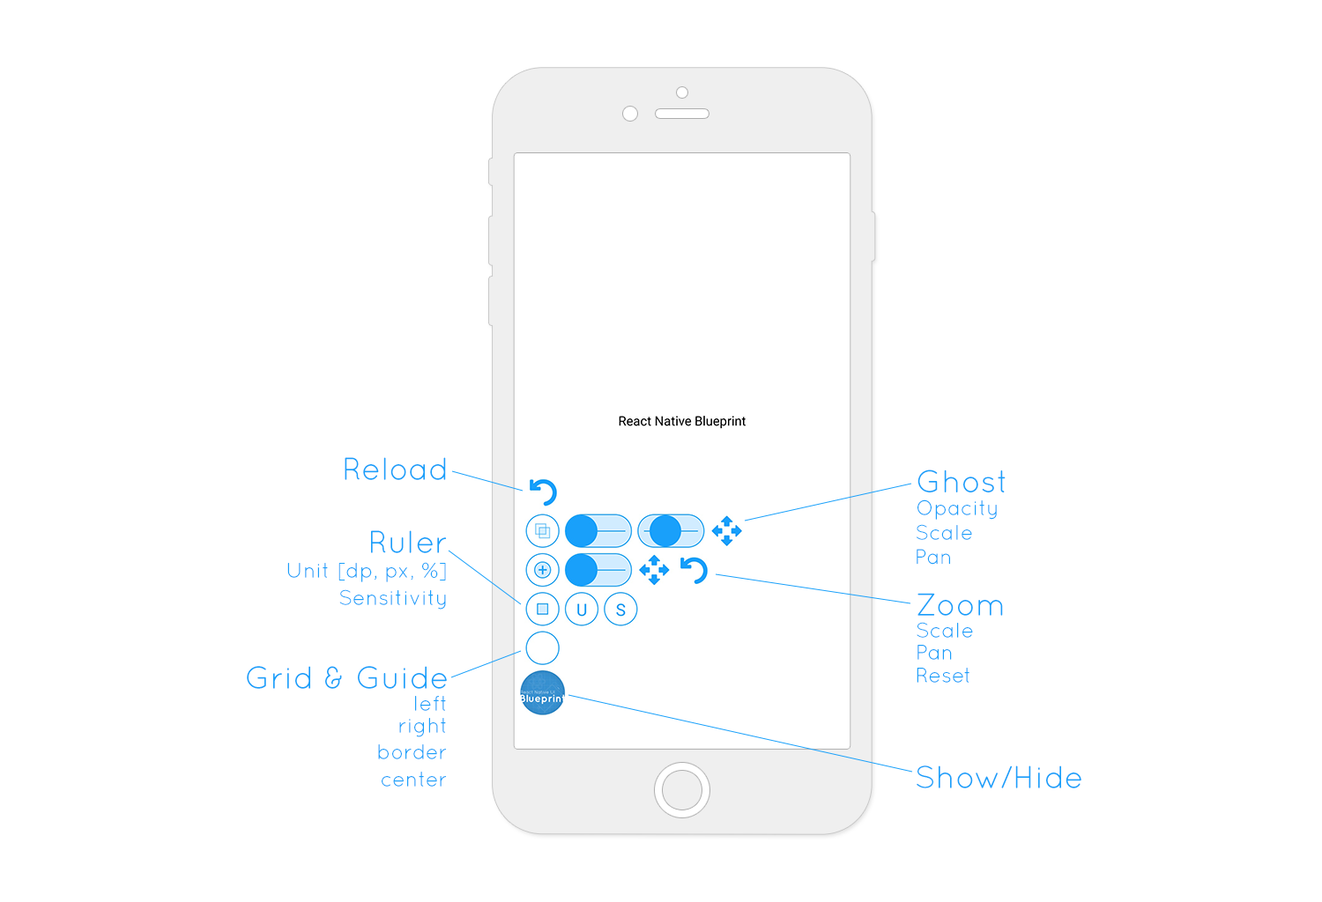
<style>
.page{position:relative;width:1322px;height:902px;background:#ffffff}
.page>*{position:absolute;margin:0}
.t1{font:31.7px "Quicksand-Regular";color:#19a0fa}
.t2{font:31.6px "Quicksand-Regular";color:#19a0fa}
.t3{font:21.1px "Quicksand-Regular";color:#19a0fa}
</style>
<div class="page">
<p class="t1" style="left:345px;top:457px;width:101px;height:23px">Reload</p>
<p class="t2" style="left:917px;top:470px;width:88px;height:23px">Ghost</p>
<p class="t3" style="left:917px;top:500px;width:80px;height:20px">Opacity</p>
<p class="t1" style="left:371px;top:530px;width:76px;height:23px">Ruler</p>
<p class="t3" style="left:916px;top:524px;width:56px;height:16px">Scale</p>
<p class="t3" style="left:916px;top:549px;width:34px;height:16px">Pan</p>
<p class="t3" style="left:287px;top:562px;width:159px;height:20px">Unit [dp, px, %]</p>
<p class="t3" style="left:339px;top:589px;width:107px;height:21px">Sensitivity</p>
<p class="t1" style="left:917px;top:593px;width:86px;height:23px">Zoom</p>
<p class="t3" style="left:916px;top:622px;width:57px;height:16px">Scale</p>
<p class="t3" style="left:917px;top:645px;width:35px;height:15px">Pan</p>
<p class="t1" style="left:247px;top:666px;width:200px;height:23px">Grid &amp; Guide</p>
<p class="t3" style="left:916px;top:668px;width:53px;height:15px">Reset</p>
<p class="t3" style="left:415px;top:696px;width:31px;height:15px">left</p>
<p class="t3" style="left:399px;top:718px;width:47px;height:19px">right</p>
<p class="t3" style="left:378px;top:745px;width:69px;height:15px">border</p>
<p class="t3" style="left:382px;top:772px;width:65px;height:15px">center</p>
<p class="t1" style="left:916px;top:766px;width:165px;height:23px">Show/Hide</p>
</div>
